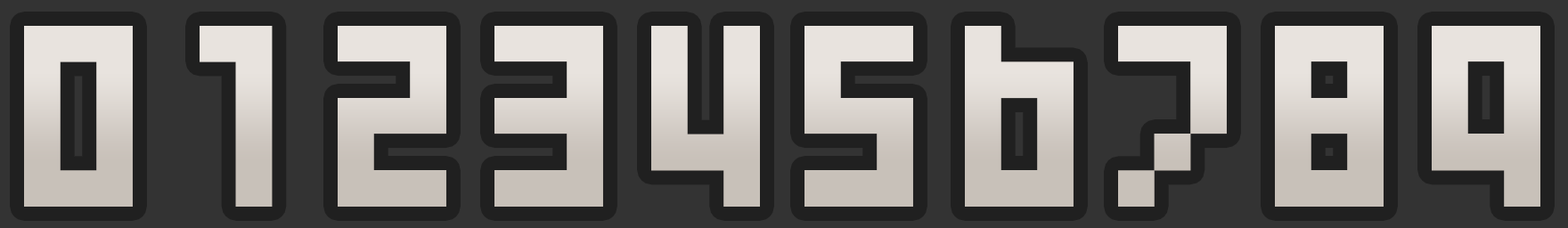
<style>
.page{position:relative;width:1568px;height:228px;background:#333333}
.page>*{position:absolute;margin:0}
.t1{font:289.7px "04b24";color:#d8d2cc;text-transform:uppercase}
.t2{font:289.7px "04b24";text-transform:uppercase}
.t3{font:289.7px "04b24";color:#d4cdc7;text-transform:uppercase}
.t4{font:289.7px "04b24";color:#dcd6d0;text-transform:uppercase}
</style>
<div class="page">
<p class="t1" style="left:24px;top:26px;width:109px;height:181px">0</p>
<p class="t2" style="left:200px;top:26px;width:73px;height:181px">1</p>
<p class="t1" style="left:338px;top:26px;width:108px;height:181px">2</p>
<p class="t1" style="left:494px;top:26px;width:109px;height:181px">3</p>
<p class="t1" style="left:651px;top:26px;width:109px;height:181px">4</p>
<p class="t1" style="left:804px;top:26px;width:109px;height:181px">5</p>
<p class="t3" style="left:965px;top:26px;width:109px;height:181px">6</p>
<p class="t2" style="left:1118px;top:26px;width:109px;height:181px">7</p>
<p class="t1" style="left:1275px;top:26px;width:109px;height:181px">8</p>
<p class="t4" style="left:1432px;top:26px;width:108px;height:181px">9</p>
</div>
